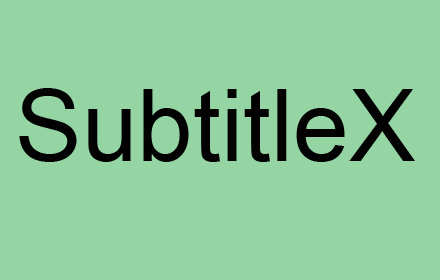
<style>
.page{position:relative;width:440px;height:280px;background:#94d5a3}
.page>*{position:absolute;margin:0}
.t1{font:100px "ArialMT";color:#000000}
</style>
<div class="page">
<p class="t1" style="left:19px;top:88px;width:396px;height:74px">SubtitleX</p>
</div>
